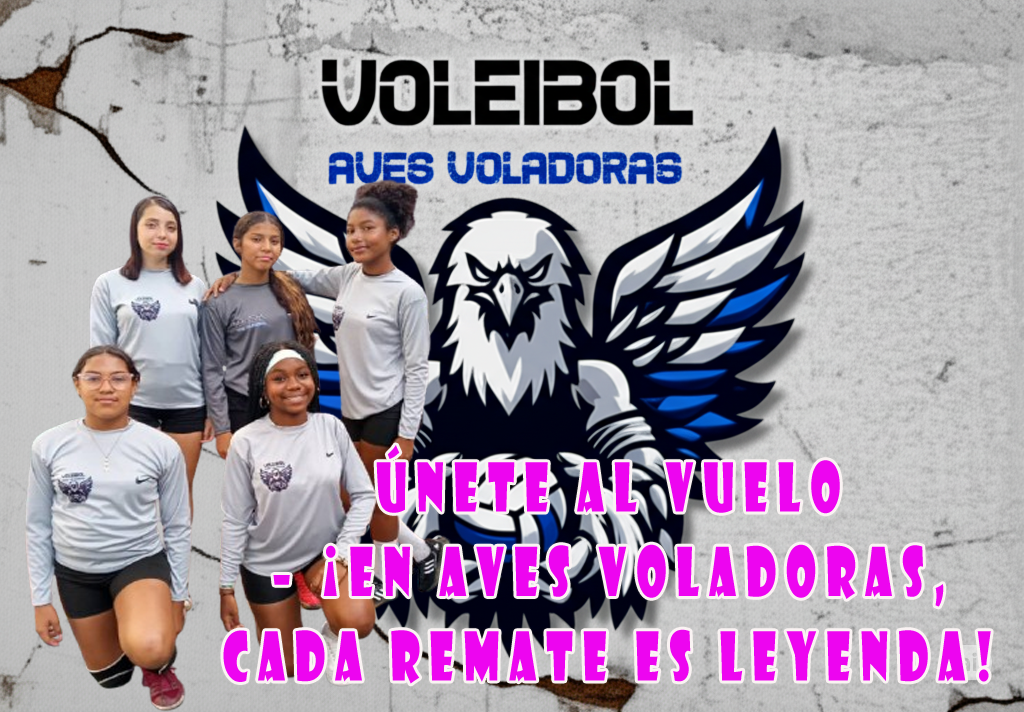
<style>
.page{position:relative;width:1024px;height:712px}
.page>*{position:absolute;margin:0}
.t1{font:65.9px/84.4px "ShowcardGothic-Reg";letter-spacing:0.23em;color:#ed05f0;scale:0.66 1}
</style>
<div class="page">
<p class="t1" style="left:223px;top:445px;width:768px;height:239px;text-align:center">Únete al vuelo<br> – ¡En Aves Voladoras, <br>cada remate es leyenda!</p>
</div>
